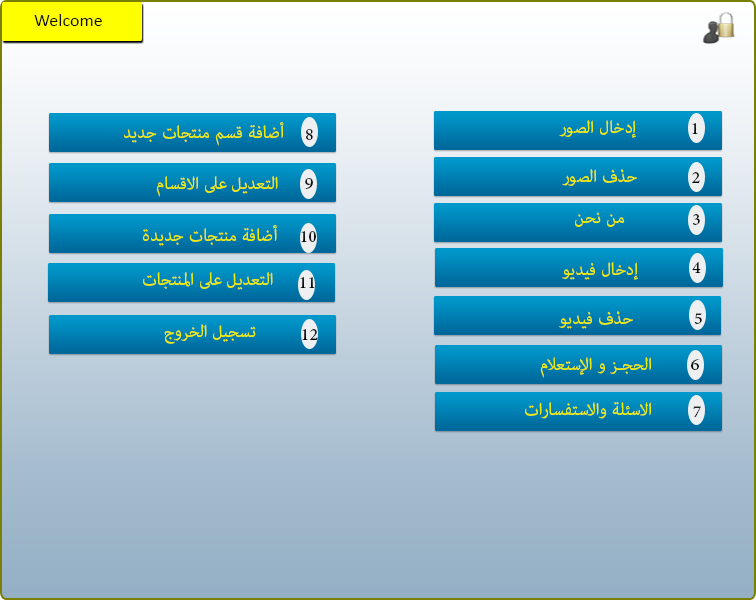
<style>
.page{position:relative;width:756px;height:600px}
.page>*{position:absolute;margin:0}
.t1{font:18px "Calibri";color:#0f0f0f}
.t2{font:24px "AdobeArabic-Regular";color:#eeeb07}
.t3{font:24px "AdobeArabic-Regular";color:#121212}
.t4{font:24px "AdobeArabic-Regular";color:#151515}
.t5{font:24px "AdobeArabic-Regular"}
.t6{font:24px "AdobeArabic-Regular";color:#181818}
.t7{font:24px "AdobeArabic-Regular";color:#131313}
.t8{font:24px "AdobeArabic-Regular";color:#0c0c0c}
.t9{font:24px "AdobeArabic-Regular";color:#101010}
.t10{font:24px "AdobeArabic-Regular";color:#1d1d1d}
.t11{font:24px "AdobeArabic-Regular";color:#111111}
.t12{font:24px "AdobeArabic-Regular";color:#0f0f0f}
.t13{font:24px "AdobeArabic-Regular";color:#232323}
</style>
<div class="page">
<p class="t1" style="left:34px;top:14px;width:68px;height:12px">Welcome</p>
<p class="t2" style="left:124px;top:122px;width:160px;height:24px">أضافة قسم منتجات جديد</p>
<p class="t2" style="left:559px;top:120px;width:77px;height:18px">إدخال الصور</p>
<p class="t3" style="left:692px;top:123px;width:6px;height:11px">1</p>
<p class="t4" style="left:306px;top:129px;width:7px;height:11px">8</p>
<p class="t2" style="left:562px;top:169px;width:75px;height:17px">حذف الصور</p>
<p class="t5" style="left:692px;top:172px;width:8px;height:11px">2</p>
<p class="t2" style="left:156px;top:176px;width:122px;height:21px">التعديل على الاقسام</p>
<p class="t6" style="left:305px;top:178px;width:8px;height:11px">9</p>
<p class="t2" style="left:575px;top:212px;width:50px;height:15px">من نحن</p>
<p class="t4" style="left:693px;top:214px;width:7px;height:11px">3</p>
<p class="t2" style="left:143px;top:225px;width:135px;height:21px">أضافة منتجات جديدة</p>
<p class="t7" style="left:301px;top:231px;width:15px;height:11px">10</p>
<p class="t2" style="left:562px;top:262px;width:76px;height:18px">إدخال فيديو</p>
<p class="t8" style="left:692px;top:262px;width:9px;height:11px">4</p>
<p class="t2" style="left:143px;top:272px;width:130px;height:18px">التعديل على المنتجات</p>
<p class="t9" style="left:300px;top:277px;width:15px;height:11px">11</p>
<p class="t2" style="left:559px;top:311px;width:74px;height:18px">حذف فيديو</p>
<p class="t10" style="left:694px;top:313px;width:8px;height:11px">5</p>
<p class="t2" style="left:164px;top:324px;width:92px;height:20px">تسجيل الخروج</p>
<p class="t11" style="left:302px;top:329px;width:16px;height:11px">12</p>
<p class="t2" style="left:540px;top:357px;width:111px;height:21px">الحجـز و الإستعلام</p>
<p class="t12" style="left:691px;top:359px;width:8px;height:11px">6</p>
<p class="t2" style="left:525px;top:402px;width:126px;height:17px">الاسئلة والاستفسارات</p>
<p class="t13" style="left:693px;top:406px;width:8px;height:11px">7</p>
</div>
